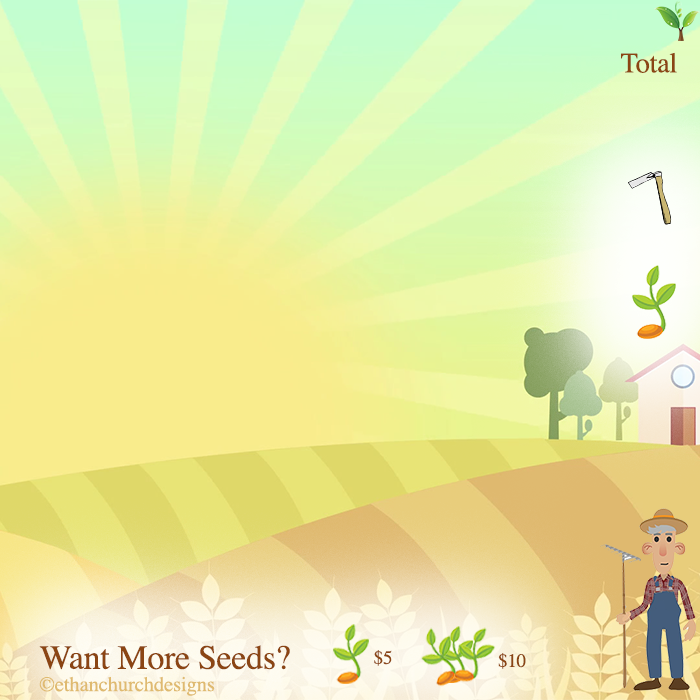
<style>
.page{position:relative;width:700px;height:700px}
.page>*{position:absolute;margin:0}
.t1{font:28.3px "Times-Roman";letter-spacing:-0.01em;color:#8b4513}
.t2{font:34px "Times-Roman";letter-spacing:-0.01em;color:#8b4513}
.t3{font:19px "Times-Roman";letter-spacing:-0.01em;color:#8b4513}
.t4{font:20.8px "Times-Roman";letter-spacing:-0.01em;color:#dfba70}
</style>
<div class="page">
<p class="t1" style="left:621px;top:52px;width:56px;height:21px">Total</p>
<p class="t2" style="left:39px;top:645px;width:251px;height:25px">Want More Seeds?</p>
<p class="t3" style="left:374px;top:650px;width:18px;height:16px">$5</p>
<p class="t3" style="left:498px;top:653px;width:28px;height:16px">$10</p>
<p class="t4" style="left:39px;top:676px;width:176px;height:20px">©ethanchurchdesigns</p>
</div>
